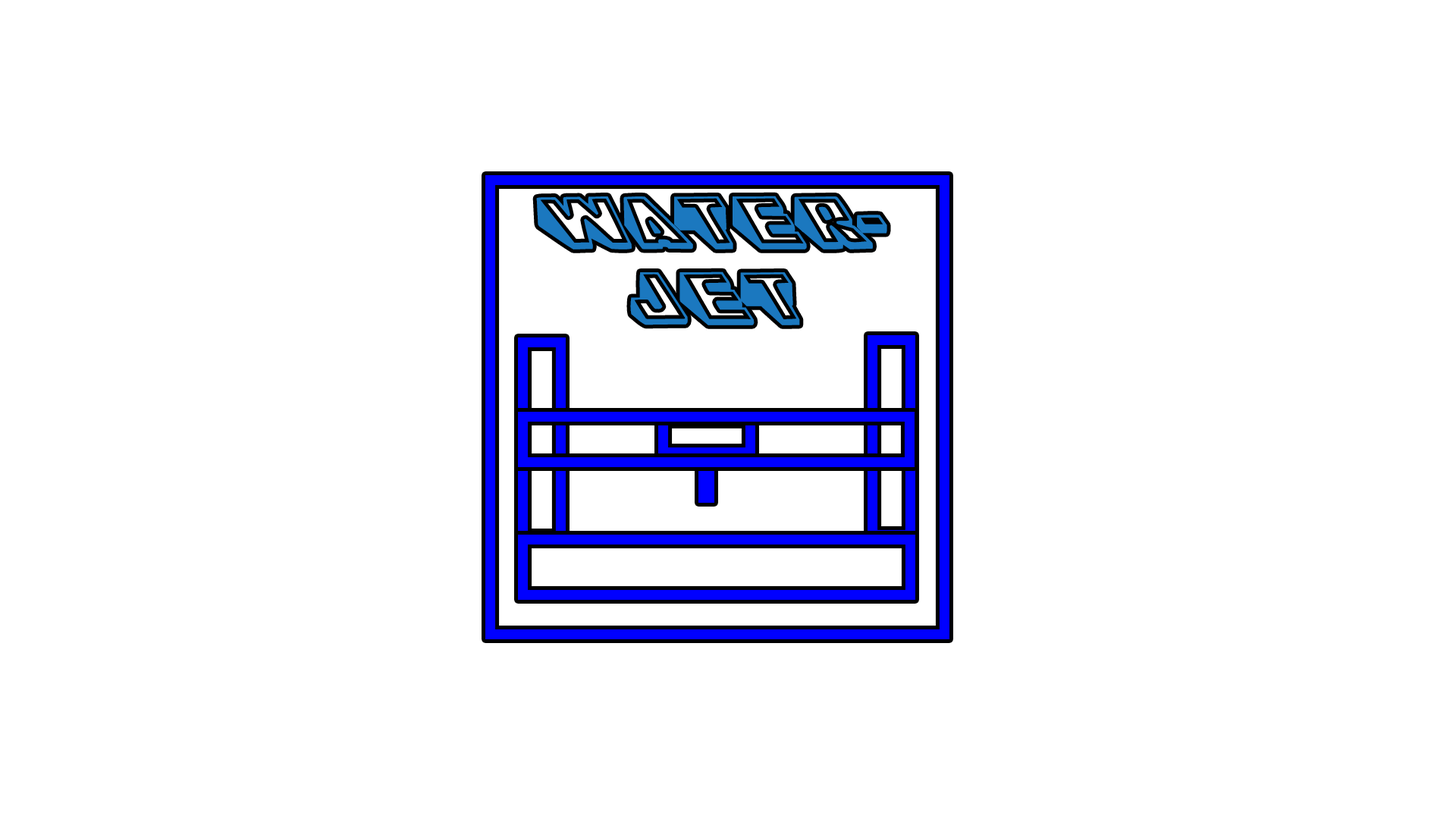
<style>
.page{position:relative;width:1456px;height:819px;background:#ffffff}
.page>*{position:absolute;margin:0}
.t1{font:61.4px/10.6px "Wedgie-Regular";color:#1b78bf;text-transform:uppercase;font-weight:bold}
.t2{font:61.4px/75.8px "Wedgie-Regular";color:#1b78bf;text-transform:uppercase;font-weight:bold}
</style>
<div class="page">
<p class="t1" style="left:536px;top:196px;width:351px;height:129px;text-align:center">Water-<span class="t2"><br>jet</span></p>
</div>
